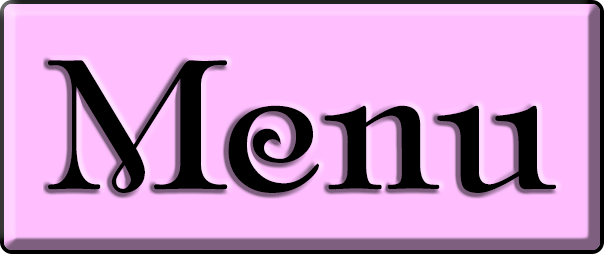
<style>
.page{position:relative;width:604px;height:254px;background:#ffbfff}
.page>*{position:absolute;margin:0}
.t1{font:184.3px "AmpirDeco";color:#000000}
</style>
<div class="page">
<p class="t1" style="left:48px;top:60px;width:508px;height:133px">Menu</p>
</div>
